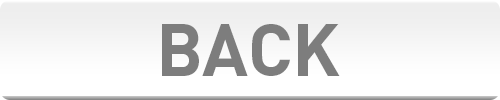
<style>
.page{position:relative;width:500px;height:100px;background:#ffffff}
.page>*{position:absolute;margin:0}
.t1{font:72px "DINPro-Bold";color:#7d7d7d}
</style>
<div class="page">
<p class="t1" style="left:162px;top:24px;width:178px;height:52px">BACK</p>
</div>
